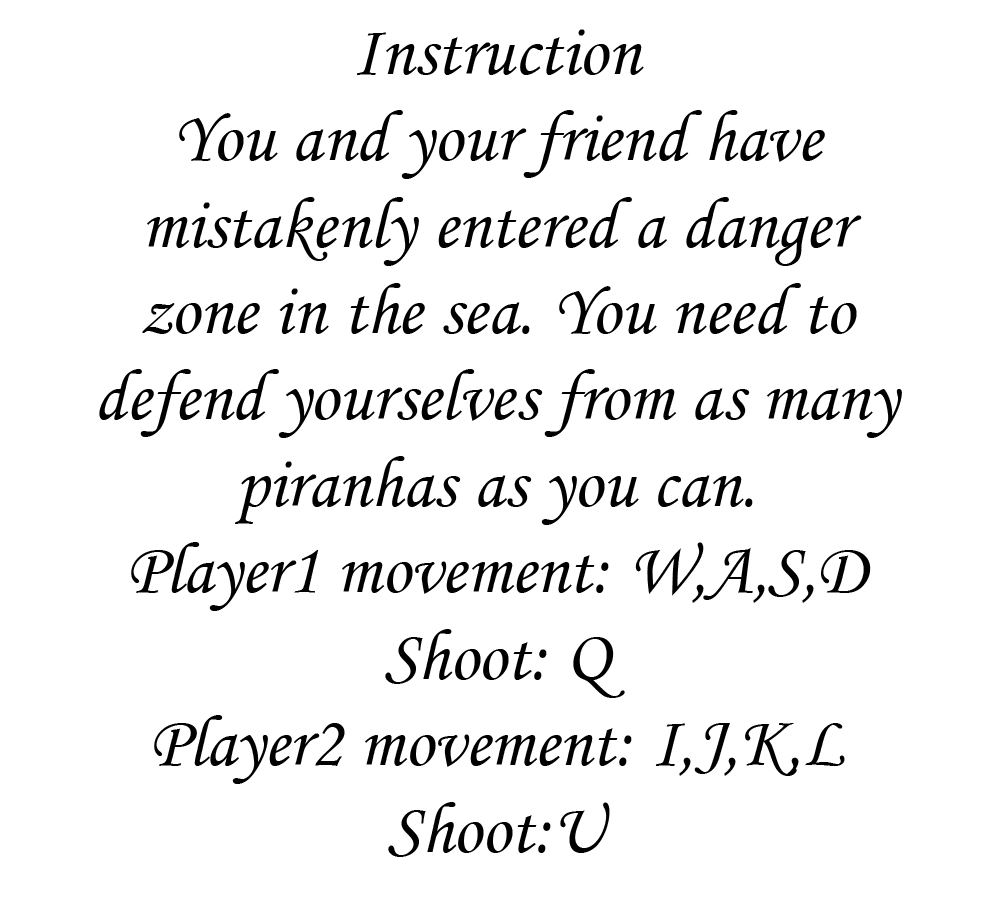
<style>
.page{position:relative;width:1000px;height:900px;background:#ffffff}
.page>*{position:absolute;margin:0}
.t1{font:72px "STLiti";color:#000000}
</style>
<div class="page">
<p class="t1" style="left:99px;top:29px;width:803px;height:828px;text-align:center">Instruction<br>You and your friend have mistakenly entered a danger zone in the sea. You need to defend yourselves from as many piranhas as you can. <br>Player1 movement: W,A,S,D<br>Shoot: Q<br>Player2 movement: I,J,K,L<br>Shoot:U</p>
</div>
